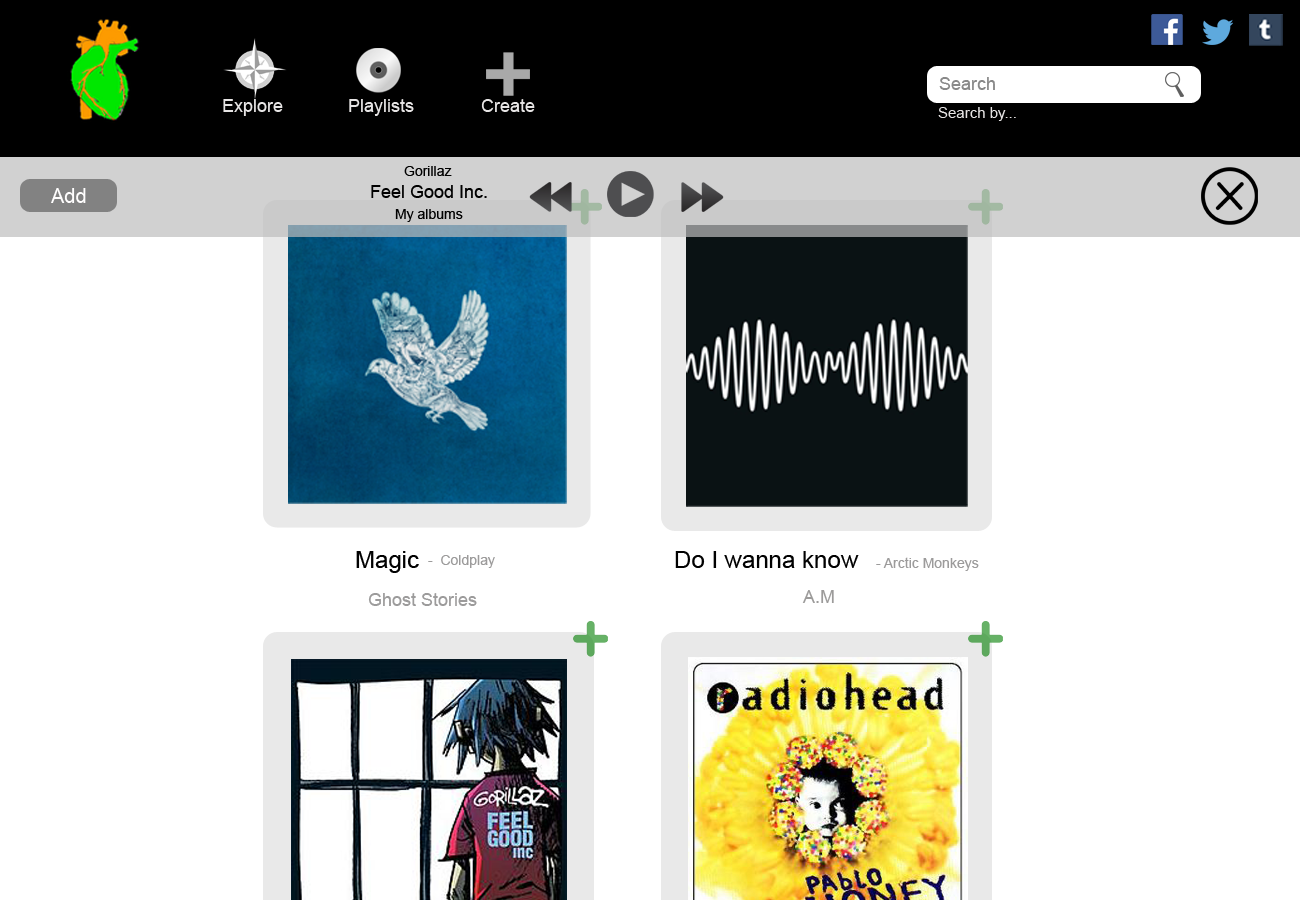
<style>
.page{position:relative;width:1300px;height:900px;background:#ffffff}
.page>*{position:absolute;margin:0}
.t1{font:18px "ArialMT";color:#898989}
.t2{font:18px "ArialMT";color:#e7e5e5}
.t3{font:15px "ArialMT";color:#e7e5e5}
.t4{font:14px "ArialMT";color:#010101}
.t5{font:18px "ArialMT";color:#010101}
.t6{font:20px "ArialMT";color:#fffefe}
.t7{font:24px "ArialMT";color:#010101}
.t8{font:14px "ArialMT";color:#9c9b9b}
.t9{font:18px "ArialMT";color:#9c9b9b}
.t10{font:18px "ArialMT";color:#9c9b9a}
</style>
<div class="page">
<p class="t1" style="left:939px;top:77px;width:56px;height:13px">Search</p>
<p class="t2" style="left:223px;top:99px;width:60px;height:17px">Explore</p>
<p class="t2" style="left:349px;top:99px;width:65px;height:17px">Playlists</p>
<p class="t2" style="left:481px;top:99px;width:54px;height:13px">Create</p>
<p class="t3" style="left:938px;top:107px;width:78px;height:14px">Search by...</p>
<p class="t4" style="left:404px;top:166px;width:48px;height:10px">Gorillaz</p>
<p class="t5" style="left:371px;top:185px;width:116px;height:13px">Feel Good Inc.</p>
<p class="t6" style="left:51px;top:188px;width:35px;height:15px">Add</p>
<p class="t4" style="left:395px;top:209px;width:68px;height:13px">My albums</p>
<p class="t7" style="left:356px;top:551px;width:63px;height:22px">Magic</p>
<p class="t8" style="left:428px;top:555px;width:67px;height:13px">-  Coldplay</p>
<p class="t7" style="left:675px;top:551px;width:184px;height:17px">Do I wanna know</p>
<p class="t8" style="left:876px;top:557px;width:103px;height:14px">- Arctic Monkeys</p>
<p class="t9" style="left:368px;top:593px;width:109px;height:13px">Ghost Stories</p>
<p class="t10" style="left:802px;top:590px;width:32px;height:13px">A.M</p>
</div>
